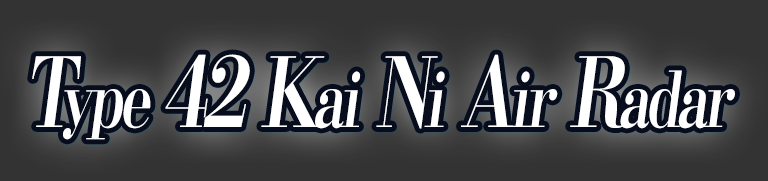
<style>
.page{position:relative;width:768px;height:181px;background:#333333}
.page>*{position:absolute;margin:0}
.t1{font:96px "KochoStd-Heavy";letter-spacing:-0.07em;color:#ffffff;font-style:italic;scale:0.75 1}
.t2{font:76.8px "KochoStd-Heavy";letter-spacing:-0.07em;color:#ffffff;font-style:italic;scale:0.75 1}
</style>
<div class="page">
<p class="t1" style="left:32px;top:54px;width:703px;height:86px">T<span class="t2">ype </span>42 K<span class="t2">ai</span> N<span class="t2">i</span> A<span class="t2">ir</span> R<span class="t2">adar</span></p>
</div>
